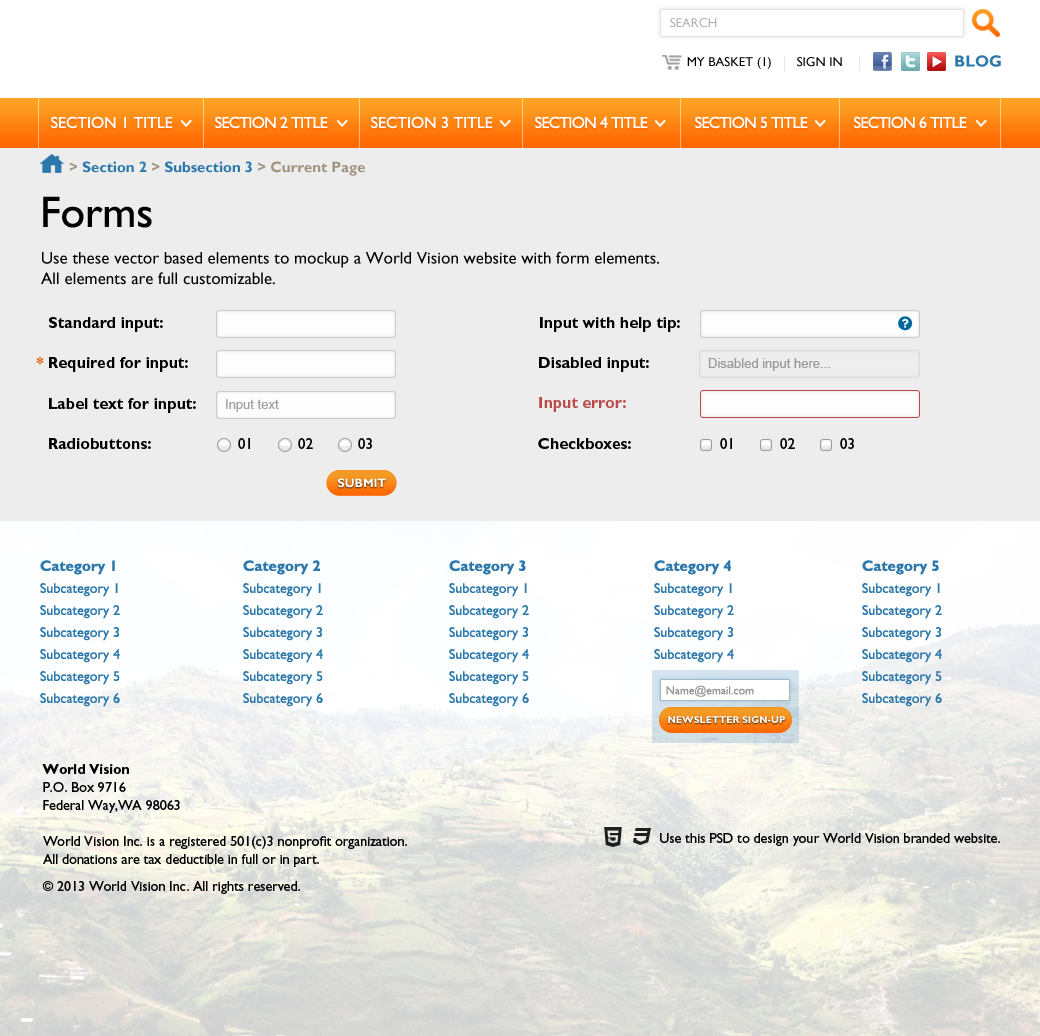
<style>
.page{position:relative;width:1040px;height:1036px;background:#ededed}
.page>*{position:absolute;margin:0}
.t1{font:13px "GillSansStd";color:#b1b0b0;text-transform:uppercase}
.t2{font:13px "GillSansStd";color:#000000;text-transform:uppercase}
.t3{font:16px "GillSansStd-Bold";color:#2d78ab}
.t4{font:16px "GillSansStd";color:#ffffff;text-transform:uppercase}
.t5{font:16px "GillSansStd";letter-spacing:-0.04em;color:#ffffff;text-transform:uppercase}
.t6{font:15px "GillSansStd-Bold";color:#9f9480}
.t7{font:15px "GillSansStd-Bold";color:#2d78ab}
.t8{font:44px "GillSansStd";color:#000000}
.t9{font:17px "GillSansStd";color:#000000}
.t10{font:16px "GillSansStd-Bold";color:#000000}
.t11{font:16px "GillSansStd-Bold";color:#e55c00}
.t12{font:13px "ArialMT";color:#999999}
.t13{font:13px "ArialMT";color:#a0a0a0}
.t14{font:16px "GillSansStd-Bold";color:#b94a48}
.t15{font:15px "GillSansStd";color:#000000}
.t16{font:12px "GillSansStd-Bold";color:#ffffff;text-transform:uppercase}
.t17{font:14px/22px "GillSansStd";color:#2d78ab}
.t18{font:15px/22px "GillSansStd-Bold";color:#2d78ab}
.t19{font:11.7px "GillSansStd";color:#969696}
.t20{font:9.9px "GillSansStd-Bold";color:#ffffff;text-transform:uppercase}
.t21{font:14px/18px "GillSansStd";color:#000000}
.t22{font:14px/20px "GillSansStd-Bold";color:#000000}
.t23{font:14px/27px "GillSansStd";color:#000000}
.t24{font:14px/20px "GillSansStd";color:#000000}
.t25{font:14px "GillSansStd";color:#000000}
</style>
<div class="page">
<p class="t1" style="left:670px;top:18px;width:47px;height:10px">SEARCH</p>
<p class="t2" style="left:687px;top:57px;width:84px;height:12px">my basket (1)</p>
<p class="t2" style="left:797px;top:57px;width:45px;height:10px">SiGN IN</p>
<p class="t3" style="left:955px;top:55px;width:46px;height:12px">BLOG</p>
<p class="t4" style="left:51px;top:116px;width:122px;height:13px">section 1 title</p>
<p class="t5" style="left:215px;top:116px;width:113px;height:13px">Section 2 title</p>
<p class="t4" style="left:371px;top:116px;width:122px;height:13px">Section 3 title</p>
<p class="t5" style="left:535px;top:116px;width:113px;height:13px">Section 4 title</p>
<p class="t5" style="left:695px;top:116px;width:113px;height:13px">section 5 title</p>
<p class="t5" style="left:854px;top:116px;width:113px;height:13px">section 6 title</p>
<p class="t6" style="left:69px;top:161px;width:296px;height:15px">&gt; <span class="t7">Section 2</span> &gt; <span class="t7">Subsection 3</span> &gt; Current Page</p>
<p class="t8" style="left:43px;top:196px;width:109px;height:32px">Forms</p>
<p class="t9" style="left:41px;top:251px;width:618px;height:34px">Use these vector based elements to mockup a World Vision website with form elements. <br>All elements are full customizable.</p>
<p class="t10" style="left:49px;top:317px;width:114px;height:15px">Standard input:</p>
<p class="t10" style="left:540px;top:317px;width:140px;height:15px">Input with help tip:</p>
<p class="t10" style="left:36px;top:357px;width:152px;height:15px"><span class="t11">* </span>Required for input:</p>
<p class="t10" style="left:539px;top:357px;width:110px;height:15px">Disabled input:</p>
<p class="t12" style="left:708px;top:358px;width:122px;height:13px">Disabled input here...</p>
<p class="t10" style="left:49px;top:398px;width:147px;height:15px">Label text for input:</p>
<p class="t13" style="left:226px;top:399px;width:53px;height:13px">Input text</p>
<p class="t14" style="left:539px;top:397px;width:87px;height:15px">Input error:</p>
<p class="t10" style="left:49px;top:438px;width:102px;height:11px">Radiobuttons:</p>
<p class="t15" style="left:238px;top:438px;width:12px;height:11px">01</p>
<p class="t15" style="left:298px;top:438px;width:15px;height:11px">02</p>
<p class="t15" style="left:358px;top:438px;width:14px;height:11px">03</p>
<p class="t10" style="left:538px;top:438px;width:93px;height:11px">Checkboxes:</p>
<p class="t15" style="left:720px;top:438px;width:12px;height:11px">01</p>
<p class="t15" style="left:780px;top:438px;width:15px;height:11px">02</p>
<p class="t15" style="left:840px;top:438px;width:14px;height:11px">03</p>
<p class="t16" style="left:338px;top:478px;width:48px;height:10px">Submit</p>
<p class="t17" style="left:40px;top:560px;width:80px;height:147px"><span class="t18">Category 1<br></span>Subcategory 1<br>Subcategory 2<br>Subcategory 3<br>Subcategory 4<br>Subcategory 5<br>Subcategory 6</p>
<p class="t17" style="left:243px;top:560px;width:80px;height:147px"><span class="t18">Category 2<br></span>Subcategory 1<br>Subcategory 2<br>Subcategory 3<br>Subcategory 4<br>Subcategory 5<br>Subcategory 6</p>
<p class="t17" style="left:449px;top:560px;width:80px;height:147px"><span class="t18">Category 3<br></span>Subcategory 1<br>Subcategory 2<br>Subcategory 3<br>Subcategory 4<br>Subcategory 5<br>Subcategory 6</p>
<p class="t17" style="left:654px;top:560px;width:80px;height:103px"><span class="t18">Category 4<br></span>Subcategory 1<br>Subcategory 2<br>Subcategory 3<br>Subcategory 4</p>
<p class="t17" style="left:862px;top:560px;width:80px;height:147px"><span class="t18">Category 5<br></span>Subcategory 1<br>Subcategory 2<br>Subcategory 3<br>Subcategory 4<br>Subcategory 5<br>Subcategory 6</p>
<p class="t19" style="left:666px;top:685px;width:88px;height:12px">Name@email.com</p>
<p class="t20" style="left:668px;top:716px;width:117px;height:7px">NEWSLETTER SIGN-UP</p>
<p class="t21" style="left:42px;top:764px;width:365px;height:130px"><span class="t22">World Vision<br></span>P.O. Box 9716<br>Federal Way,WA 98063<br><br>World Vision Inc. is a registered 501(c)3 nonprofit organization.<br>All donations are tax deductible in full or in part.<br><span class="t23">© 2013 World Visio</span><span class="t24">n Inc. All rights reserved.</span></p>
<p class="t25" style="left:660px;top:833px;width:340px;height:13px">Use this PSD to design your World Vision branded website.</p>
</div>
